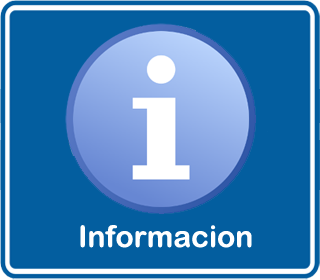
<style>
.page{position:relative;width:320px;height:280px;background:#035e9f}
.page>*{position:absolute;margin:0}
.t1{font:30px "ArialRoundedMTBold";color:#ffffff}
</style>
<div class="page">
<p class="t1" style="left:80px;top:225px;width:172px;height:23px">Informacion</p>
</div>
